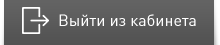
<style>
.page{position:relative;width:220px;height:45px}
.page>*{position:absolute;margin:0}
.t1{font:16px "DINPro-Regular";color:#ffffff}
</style>
<div class="page">
<p class="t1" style="left:59px;top:14px;width:137px;height:12px">Выйти из кабинета</p>
</div>
